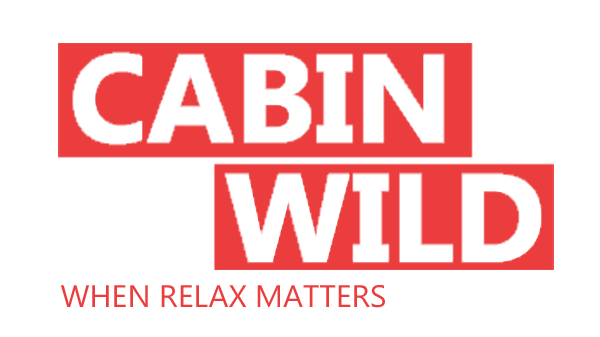
<style>
.page{position:relative;width:600px;height:337px;background:#ffffff}
.page>*{position:absolute;margin:0}
.t1{font:124.4px "MicrosoftNewTaiLue-Bold";color:#ffffff}
.t2{font:31.1px "MicrosoftNewTaiLue";color:#eb3d3d}
</style>
<div class="page">
<p class="t1" style="left:74px;top:53px;width:369px;height:91px">CABIN</p>
<p class="t1" style="left:227px;top:175px;width:314px;height:87px">WILD</p>
<p class="t2" style="left:61px;top:285px;width:324px;height:23px">WHEN RELAX MATTERS</p>
</div>
